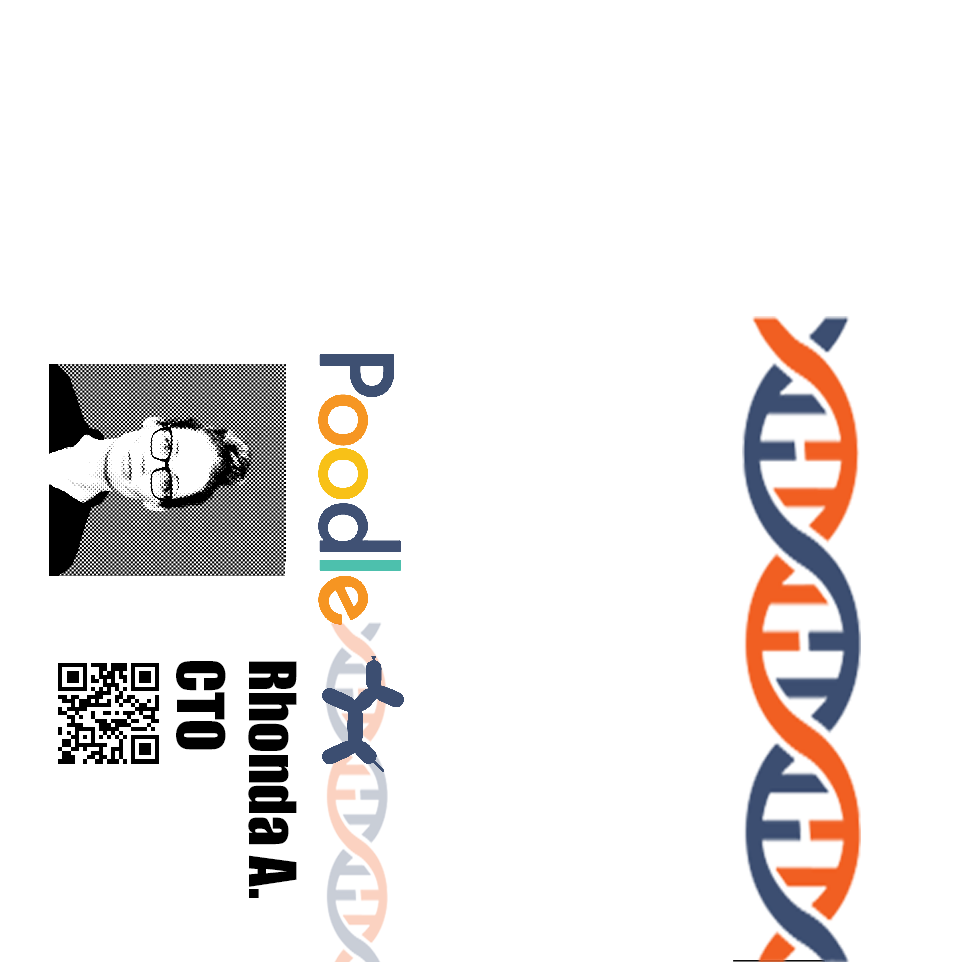
<style>
.page{position:relative;width:960px;height:962px;background:#ffffff}
.page>*{position:absolute;margin:0}
.t1{font:60px "Impact";color:#000000}
</style>
<div class="page">
<p class="t1" style="left:176px;top:661px;width:121px;height:237px;rotate:90deg">Rhonda A.<br>CTO</p>
</div>
